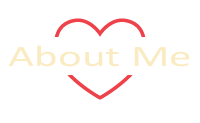
<style>
.page{position:relative;width:200px;height:123px;background:#ffffff}
.page>*{position:absolute;margin:0}
.t1{font:30px "Calibri";color:#faebc2;scale:1.5 1}
</style>
<div class="page">
<p class="t1" style="left:8px;top:45px;width:182px;height:22px">About Me</p>
</div>
